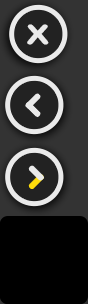
<style>
.page{position:relative;width:88px;height:304px;background:#000000}
.page>*{position:absolute;margin:0}
.t1{font:37.1px "ArialRoundedMTBold";color:#eaeaea;scale:1.21 1}
</style>
<div class="page">
<p class="t1" style="left:27px;top:24px;width:22px;height:21px">x</p>
</div>
